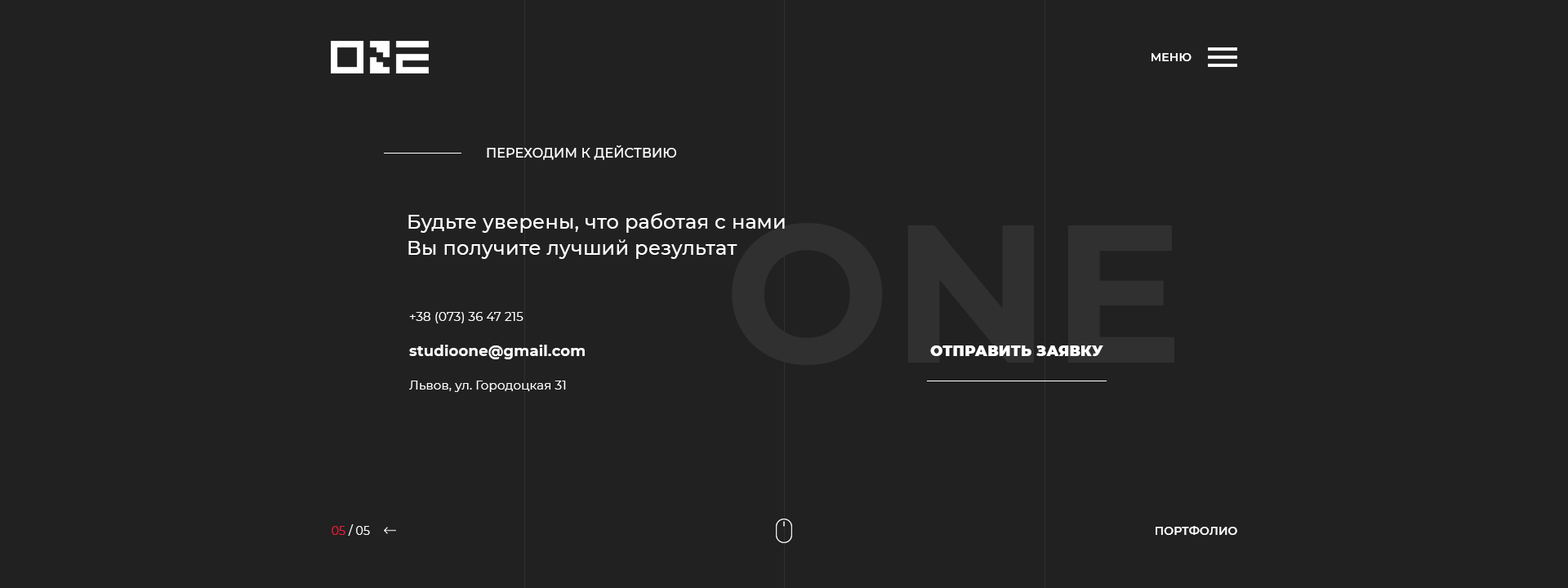
<style>
.page{position:relative;width:1568px;height:588px;background:#212121}
.page>*{position:absolute;margin:0}
.t1{font:11.4px "Montserrat-SemiBold";letter-spacing:0.01em;color:#ffffff}
.t2{font:13.1px "Montserrat-Medium";letter-spacing:0.01em;color:#ffffff}
.t3{font:19.6px/26.1px "Montserrat-Medium";letter-spacing:0.01em;color:#ffffff}
.t4{font:12.2px "Montserrat-Regular";letter-spacing:0.01em;color:#ffffff}
.t5{font:14.7px "Montserrat-Bold";letter-spacing:0.01em;color:#ffffff}
.t6{font:14.7px "Montserrat-Black";letter-spacing:0.01em;color:#ffffff}
.t7{font:11.4px "Montserrat-Regular";letter-spacing:0.01em;color:#ffffff}
.t8{font:11.4px "Montserrat-Regular";letter-spacing:0.01em;color:#e91b38}
</style>
<div class="page">
<p class="t1" style="left:1152px;top:53px;width:40px;height:8px">МЕНЮ</p>
<p class="t2" style="left:487px;top:145px;width:189px;height:15px">ПЕРЕХОДИМ К ДЕЙСТВИЮ</p>
<p class="t3" style="left:408px;top:212px;width:377px;height:47px">Будьте уверены, что работая с нами <br>Вы получите лучший результат</p>
<p class="t4" style="left:409px;top:312px;width:114px;height:11px">+38 (073) 36 47 215</p>
<p class="t5" style="left:409px;top:345px;width:176px;height:14px">studioone@gmail.com</p>
<p class="t6" style="left:930px;top:345px;width:173px;height:11px">ОТПРАВИТЬ ЗАЯВКУ</p>
<p class="t4" style="left:409px;top:381px;width:157px;height:11px">Львов, ул. Городоцкая 31</p>
<p class="t7" style="left:332px;top:524px;width:38px;height:12px"><span class="t8">05</span> / 05</p>
<p class="t1" style="left:1156px;top:526px;width:81px;height:9px">ПОРТФОЛИО</p>
</div>
